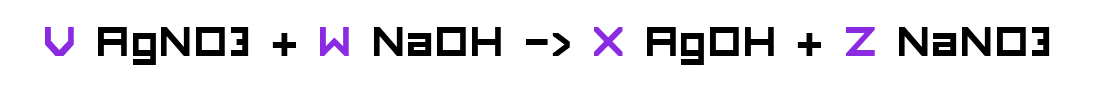
<style>
.page{position:relative;width:1100px;height:85px;background:#ffffff}
.page>*{position:absolute;margin:0}
.t1{font:55px "FORCED-SQUARE";color:#000000}
.t2{font:55px "FORCED-SQUARE";color:#8a2be2}
</style>
<div class="page">
<p class="t1" style="left:45px;top:27px;width:1005px;height:38px"><span class="t2">V</span> AgNO3 + <span class="t2">W </span>NaOH -&gt; <span class="t2">X</span> AgOH + <span class="t2">Z </span>NaNO3</p>
</div>
